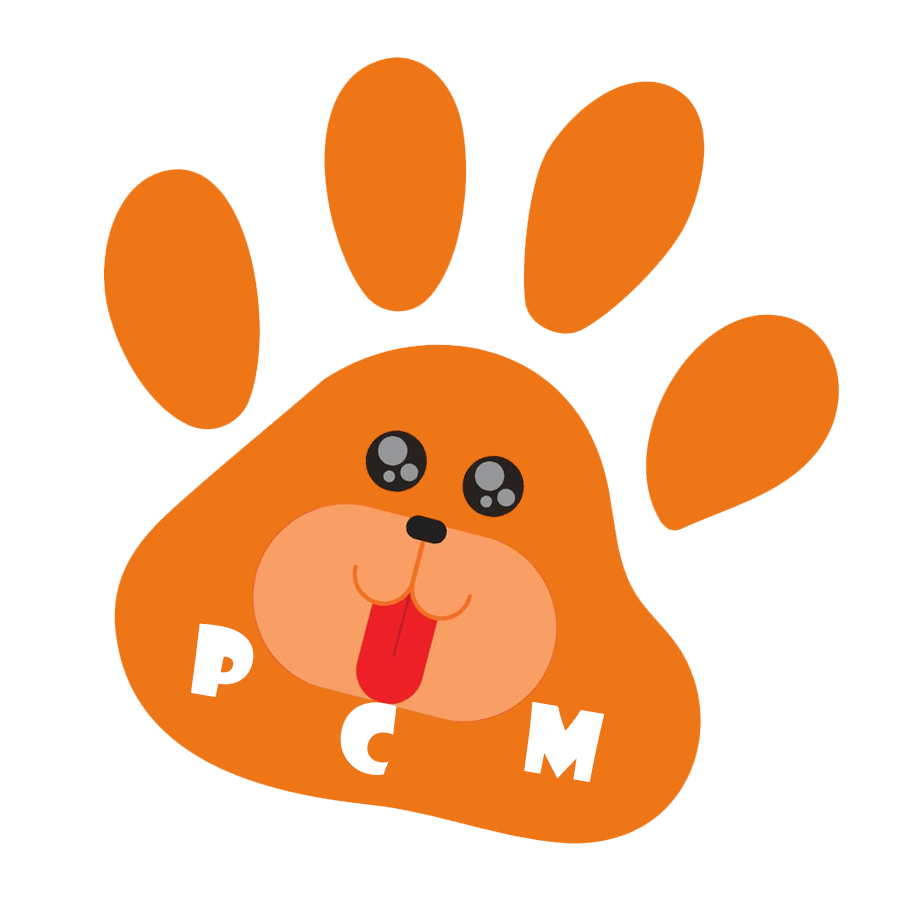
<style>
.page{position:relative;width:900px;height:900px;background:#ffffff}
.page>*{position:absolute;margin:0}
.t1{font:92.5px "ShowcardGothic-Reg";color:#ffffff}
</style>
<div class="page">
<p class="t1" style="left:191px;top:623px;width:63px;height:74px;rotate:10deg">P</p>
<p class="t1" style="left:340px;top:702px;width:57px;height:73px;rotate:10deg">C</p>
<p class="t1" style="left:524px;top:701px;width:81px;height:81px;rotate:10deg">M</p>
</div>
